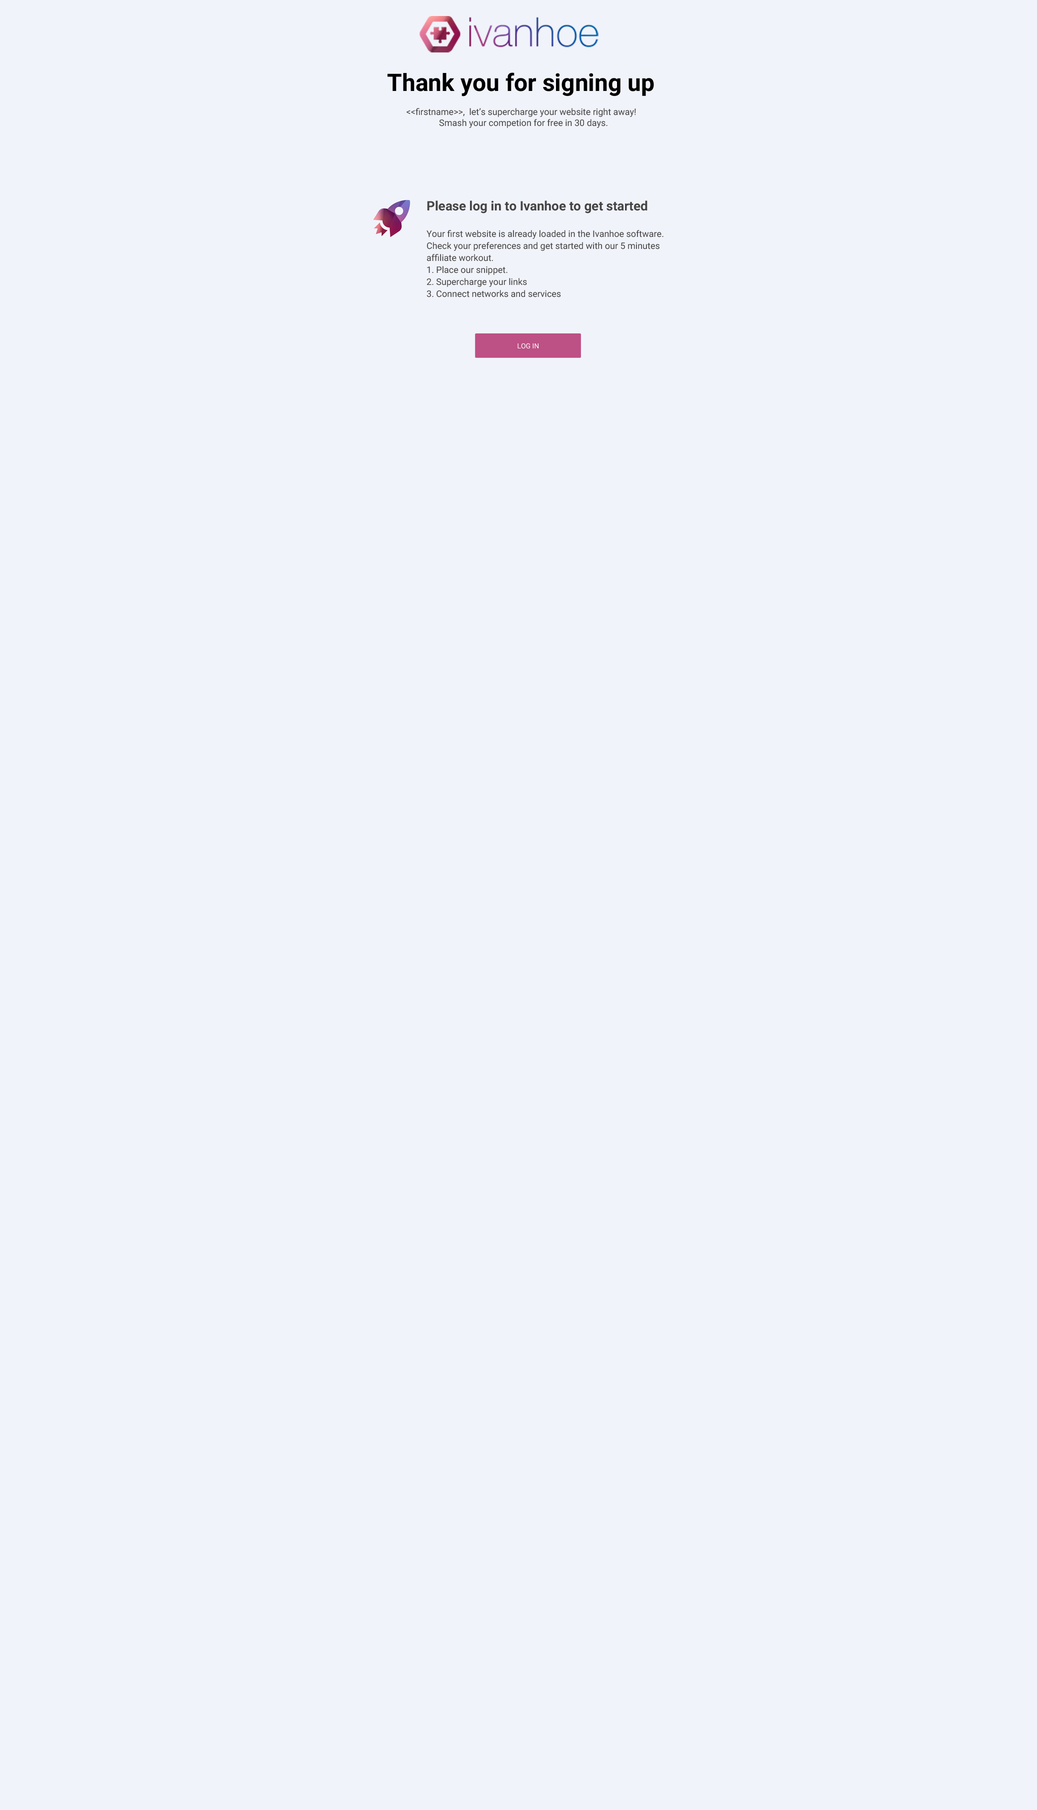
<style>
.page{position:relative;width:1037px;height:1810px;background:#f1f3fa}
.page>*{position:absolute;margin:0}
.t1{font:24px "Roboto-Bold";color:#000000}
.t2{font:9px "Roboto-Regular";color:#444444}
.t3{font:13px "Roboto-Bold";color:#444444}
.t4{font:9px/12px "Roboto-Regular";color:#444444}
.t5{font:7px "Roboto-Regular";color:#ffffff;text-transform:uppercase}
</style>
<div class="page">
<p class="t1" style="left:388px;top:72px;width:266px;height:24px">Thank you for signing up</p>
<p class="t2" style="left:406px;top:108px;width:230px;height:20px;text-align:center">&lt;&lt;firstname&gt;&gt;,  let’s supercharge your website right away!  <br>Smash your competion for free in 30 days.</p>
<p class="t3" style="left:427px;top:200px;width:221px;height:14px">Please log in to Ivanhoe to get started</p>
<p class="t4" style="left:426px;top:230px;width:238px;height:68px">Your first website is already loaded in the Ivanhoe software.<br>Check your preferences and get started with our 5 minutes<br>affiliate workout. <br>1. Place our snippet.<br>2. Supercharge your links<br>3. Connect networks and services</p>
<p class="t5" style="left:518px;top:344px;width:20px;height:5px">log in</p>
</div>
